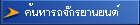
<style>
.page{position:relative;width:140px;height:25px}
.page>*{position:absolute;margin:0}
.t1{font:15.3px "EucrosiaDSE";color:#ffffff;scale:1.12 1}
</style>
<div class="page">
<p class="t1" style="left:25px;top:3px;width:95px;height:13px">¤é¹ËÒÃ¶¨Ñ¡ÃÂÒ¹Â¹µì</p>
</div>
